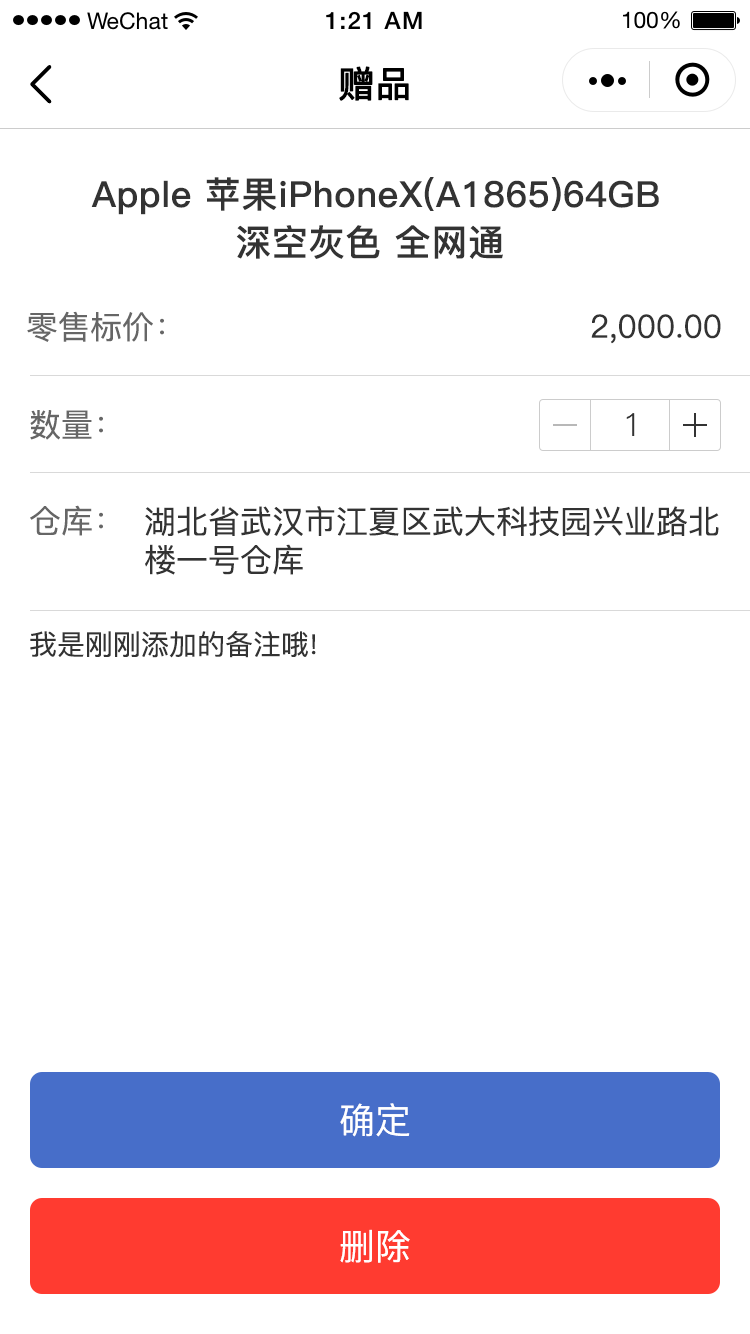
<style>
.page{position:relative;width:750px;height:1334px;background:#ffffff}
.page>*{position:absolute;margin:0}
.t1{font:36px "PingFang-SC-Medium";color:#000000;font-weight:bold}
.t2{font:36px/48px "PingFang-SC-Bold";letter-spacing:0.02em;color:#333333}
.t3{font:32px "PingFang-SC-Medium";color:#666666}
.t4{font:32px "PingFang-SC-Medium";color:#333333}
.t5{font:32px "PingFang-SC-Regular";color:#333333}
.t6{font:28px "PingFang-SC-Medium";color:#333333}
.t7{font:36px "PingFang-SC-Medium";color:#ffffff}
</style>
<div class="page">
<p class="t1" style="left:339px;top:66px;width:70px;height:35px">赠品</p>
<p class="t2" style="left:91px;top:177px;width:568px;height:82px;text-align:center">Apple 苹果iPhoneX(A1865)64GB<br>深空灰色 全网通</p>
<p class="t3" style="left:27px;top:311px;width:137px;height:31px">零售标价：</p>
<p class="t4" style="left:591px;top:314px;width:130px;height:30px">2,000.00</p>
<p class="t3" style="left:30px;top:410px;width:73px;height:30px">数量：</p>
<p class="t5" style="left:626px;top:413px;width:9px;height:23px">1</p>
<p class="t3" style="left:30px;top:505px;width:73px;height:31px">仓库：</p>
<p class="t4" style="left:145px;top:506px;width:574px;height:69px">湖北省武汉市江夏区武大科技园兴业路北<br>楼一号仓库</p>
<p class="t6" style="left:30px;top:631px;width:286px;height:27px">我是刚刚添加的备注哦!</p>
<p class="t7" style="left:340px;top:1103px;width:70px;height:34px">确定</p>
<p class="t7" style="left:340px;top:1229px;width:70px;height:34px">删除</p>
</div>
